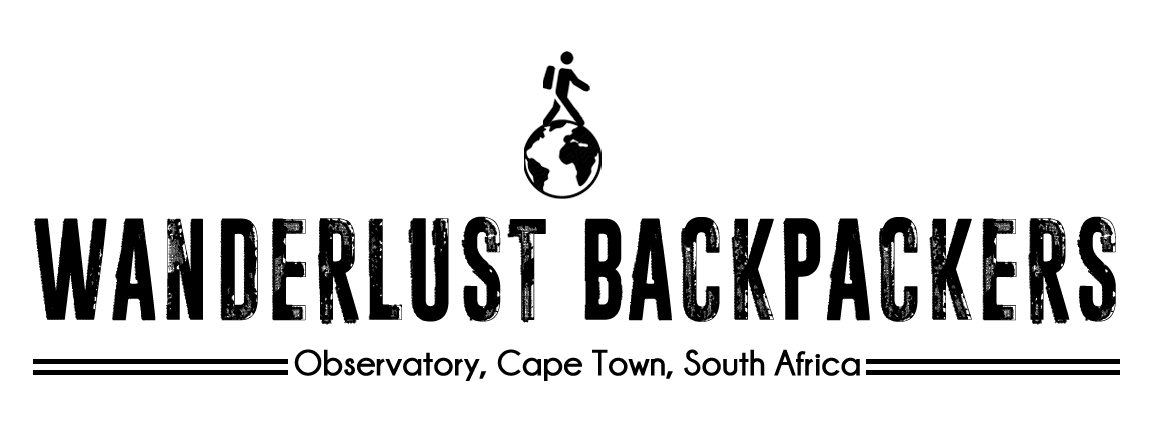
<style>
.page{position:relative;width:1152px;height:432px;background:#ffffff}
.page>*{position:absolute;margin:0}
.t1{font:144px "ParanoidOrange";color:#000000}
.t2{font:36px "Champagne&Limousines-Bold";color:#000000}
</style>
<div class="page">
<p class="t1" style="left:34px;top:216px;width:1082px;height:109px">Wanderlust Backpackers</p>
<p class="t2" style="left:294px;top:349px;width:566px;height:32px">Observatory, Cape Town, South Africa</p>
</div>
